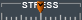
<style>
.page{position:relative;width:82px;height:20px;background:#3c464f}
.page>*{position:absolute;margin:0}
.t1{font:8px "ArialMT";letter-spacing:0.075em;color:#ffffff;font-weight:bold}
</style>
<div class="page">
<p class="t1" style="left:22px;top:2px;width:36px;height:6px">STRESS</p>
</div>
